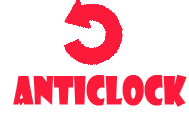
<style>
.page{position:relative;width:189px;height:113px;background:#ffffff}
.page>*{position:absolute;margin:0}
.t1{font:36.8px "ShowcardGothic-Reg";color:#fc1a3a;font-weight:bold;scale:0.83 1}
</style>
<div class="page">
<p class="t1" style="left:13px;top:75px;width:174px;height:32px">ANTIclock</p>
</div>
